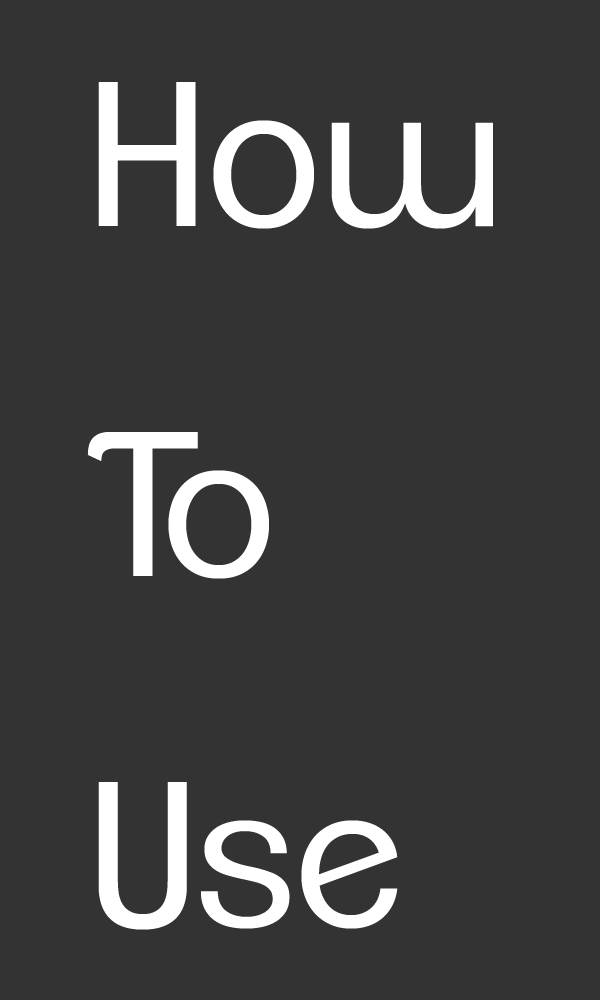
<style>
.page{position:relative;width:600px;height:1000px;background:#333333}
.page>*{position:absolute;margin:0}
.t1{font:200px "ClementePDag-Book";color:#ffffff}
</style>
<div class="page">
<p class="t1" style="left:87px;top:82px;width:406px;height:848px">How<br>To<br>Use</p>
</div>
